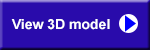
<style>
.page{position:relative;width:150px;height:50px;background:#290bab}
.page>*{position:absolute;margin:0}
.t1{font:14px "Arial-BoldMT";color:#ffffff}
</style>
<div class="page">
<p class="t1" style="left:11px;top:19px;width:99px;height:11px">View 3D model</p>
</div>
